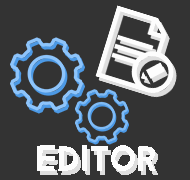
<style>
.page{position:relative;width:190px;height:180px;background:#333333}
.page>*{position:absolute;margin:0}
.t1{font:35.5px "Bizon";color:#fdfdfd;font-weight:bold}
</style>
<div class="page">
<p class="t1" style="left:37px;top:145px;width:118px;height:26px">EDITOR</p>
</div>
